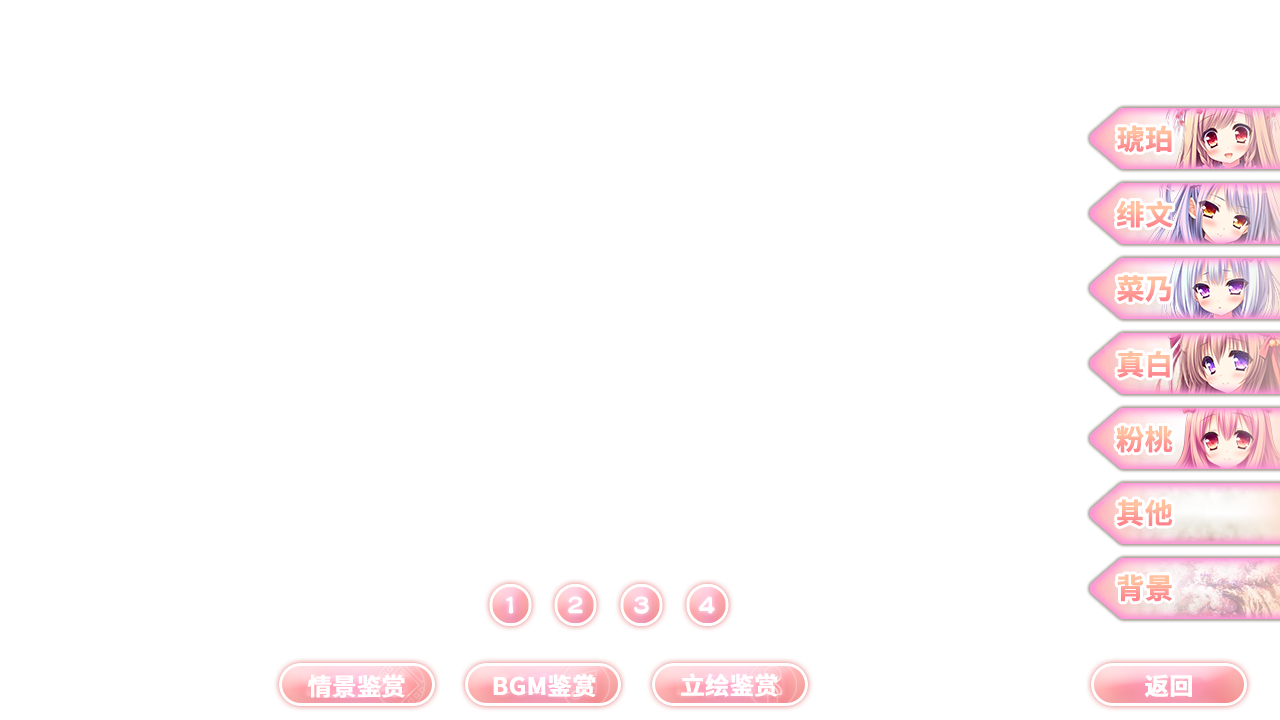
<style>
.page{position:relative;width:1280px;height:720px;background:#ffffff}
.page>*{position:absolute;margin:0}
.t1{font:28px "SourceHanSansSC-Bold";font-weight:bold}
.t2{font:28px "SourceHanSansSC-Bold";color:#ffae9a;font-weight:bold}
.t3{font:24px "SourceHanSansSC-Bold";color:#ffffff;font-weight:bold}
</style>
<div class="page">
<p class="t1" style="left:1117px;top:125px;width:55px;height:28px">琥珀</p>
<p class="t2" style="left:1116px;top:200px;width:57px;height:28px">绯文</p>
<p class="t1" style="left:1117px;top:275px;width:54px;height:27px">菜乃</p>
<p class="t1" style="left:1117px;top:350px;width:53px;height:28px">真白</p>
<p class="t2" style="left:1116px;top:425px;width:57px;height:28px">粉桃</p>
<p class="t1" style="left:1117px;top:499px;width:56px;height:28px">其他</p>
<p class="t1" style="left:1117px;top:574px;width:55px;height:28px">背景</p>
<p class="t3" style="left:307px;top:674px;width:98px;height:24px">情景鉴赏</p>
<p class="t3" style="left:493px;top:674px;width:103px;height:23px">BGM鉴赏</p>
<p class="t3" style="left:681px;top:673px;width:97px;height:24px">立绘鉴赏</p>
<p class="t3" style="left:1144px;top:674px;width:48px;height:24px">返回</p>
</div>
